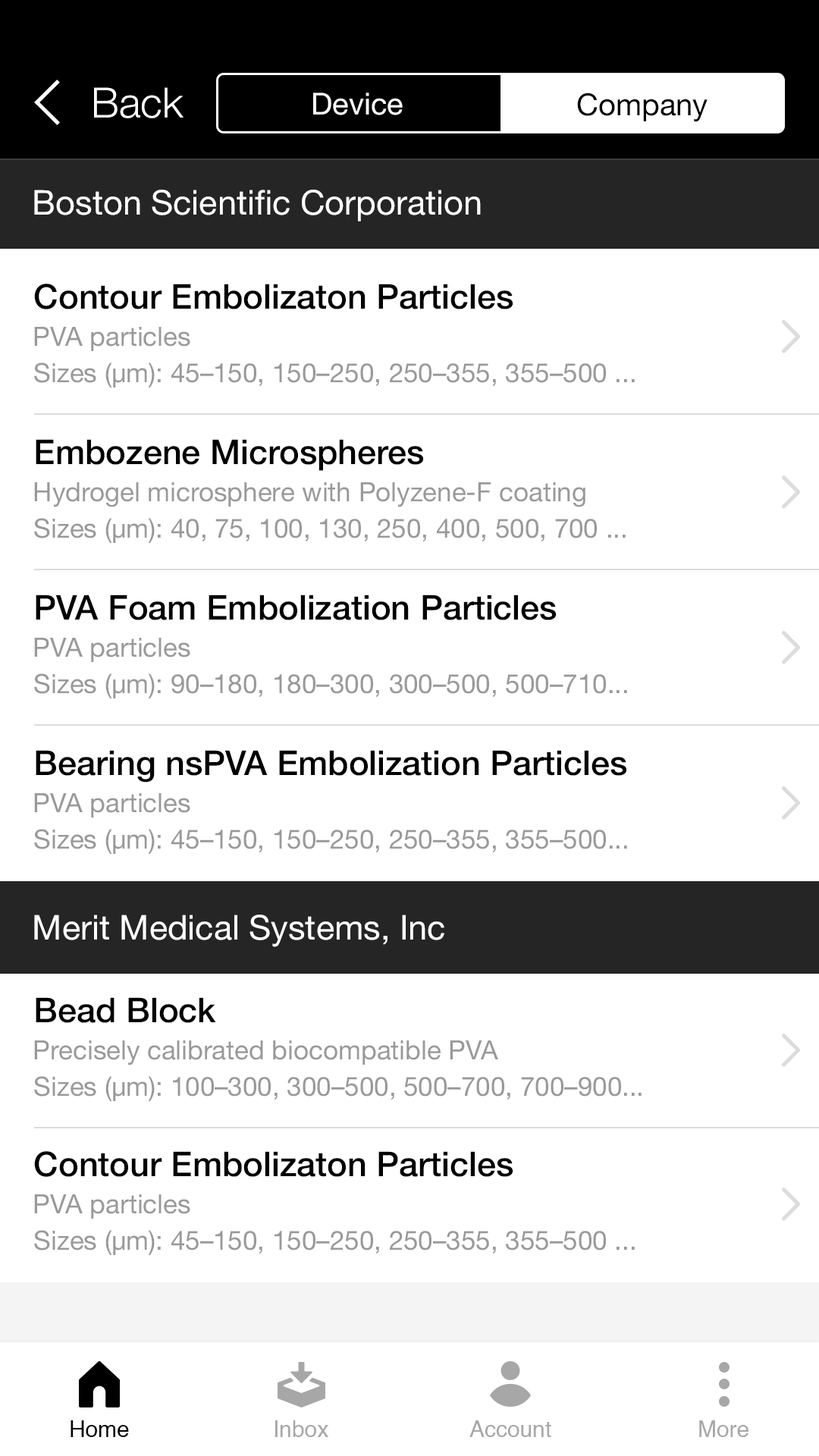
<style>
.page{position:relative;width:819px;height:1456px;background:#ffffff}
.page>*{position:absolute;margin:0}
.t1{font:41.7px "HelveticaNeue-Light";color:#ffffff}
.t2{font:30.3px "HelveticaNeue";color:#ffffff}
.t3{font:30.3px "HelveticaNeue";color:#000000}
.t4{font:34.1px "HelveticaNeue";color:#ffffff}
.t5{font:34.1px "HelveticaNeue-Medium";color:#000000}
.t6{font:26.5px "HelveticaNeue";color:#999999}
.t7{font:22.7px "Helvetica";color:#000000}
.t8{font:22.7px "Helvetica";color:#a7a7a7}
</style>
<div class="page">
<p class="t1" style="left:94px;top:87px;width:90px;height:31px">Back</p>
<p class="t2" style="left:313px;top:93px;width:90px;height:22px">Device</p>
<p class="t3" style="left:577px;top:93px;width:131px;height:29px">Company</p>
<p class="t4" style="left:34px;top:190px;width:447px;height:31px">Boston Scientific Corporation</p>
<p class="t5" style="left:34px;top:284px;width:479px;height:25px">Contour Embolizaton Particles</p>
<p class="t6" style="left:34px;top:327px;width:156px;height:24px">PVA particles</p>
<p class="t6" style="left:34px;top:362px;width:601px;height:26px">Sizes (µm): 45–150, 150–250, 250–355, 355–500 ...</p>
<p class="t5" style="left:36px;top:439px;width:388px;height:32px">Embozene Microspheres</p>
<p class="t6" style="left:34px;top:482px;width:551px;height:25px">Hydrogel microsphere with Polyzene-F coating</p>
<p class="t6" style="left:34px;top:518px;width:592px;height:25px">Sizes (µm): 40, 75, 100, 130, 250, 400, 500, 700 ...</p>
<p class="t5" style="left:36px;top:595px;width:521px;height:25px">PVA Foam Embolization Particles</p>
<p class="t6" style="left:34px;top:638px;width:156px;height:24px">PVA particles</p>
<p class="t6" style="left:34px;top:673px;width:593px;height:25px">Sizes (µm): 90–180, 180–300, 300–500, 500–710...</p>
<p class="t5" style="left:36px;top:750px;width:591px;height:33px">Bearing nsPVA Embolization Particles</p>
<p class="t6" style="left:34px;top:793px;width:156px;height:24px">PVA particles</p>
<p class="t6" style="left:34px;top:829px;width:593px;height:25px">Sizes (µm): 45–150, 150–250, 250–355, 355–500...</p>
<p class="t4" style="left:34px;top:915px;width:410px;height:32px">Merit Medical Systems, Inc</p>
<p class="t5" style="left:36px;top:997px;width:180px;height:26px">Bead Block</p>
<p class="t6" style="left:34px;top:1040px;width:464px;height:25px">Precisely calibrated biocompatible PVA</p>
<p class="t6" style="left:34px;top:1076px;width:608px;height:25px">Sizes (µm): 100–300, 300–500, 500–700, 700–900...</p>
<p class="t5" style="left:34px;top:1151px;width:479px;height:26px">Contour Embolizaton Particles</p>
<p class="t6" style="left:34px;top:1194px;width:156px;height:25px">PVA particles</p>
<p class="t6" style="left:34px;top:1230px;width:601px;height:25px">Sizes (µm): 45–150, 150–250, 250–355, 355–500 ...</p>
<p class="t7" style="left:71px;top:1420px;width:58px;height:17px">Home</p>
<p class="t8" style="left:275px;top:1420px;width:53px;height:17px">Inbox</p>
<p class="t8" style="left:469px;top:1420px;width:82px;height:17px">Account</p>
<p class="t8" style="left:699px;top:1420px;width:49px;height:17px">More</p>
</div>
